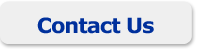
<style>
.page{position:relative;width:200px;height:53px;background:#efefef}
.page>*{position:absolute;margin:0}
.t1{font:21px "Verdana-Bold";letter-spacing:-0.05em;color:#00309c}
</style>
<div class="page">
<p class="t1" style="left:37px;top:17px;width:117px;height:17px">Contact Us</p>
</div>
